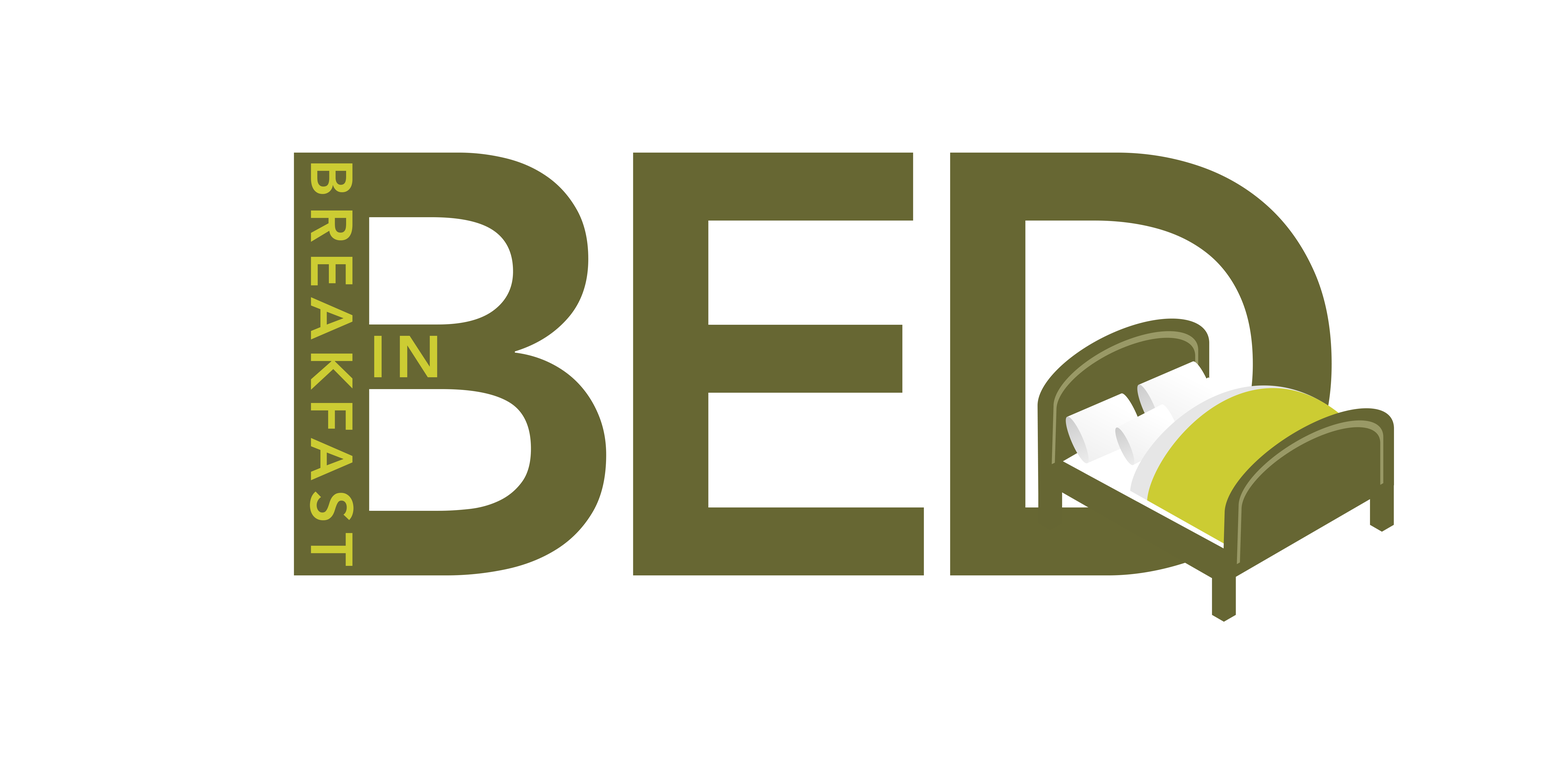
<style>
.page{position:relative;width:1544px;height:772px;background:#ffffff}
.page>*{position:absolute;margin:0}
.t1{font:597.2px "Avenir-Heavy";letter-spacing:-0.08em;color:#666632}
.t2{font:58.5px "Avenir-Heavy";letter-spacing:0.16em;color:#cccc33}
</style>
<div class="page">
<p class="t1" style="left:294px;top:153px;width:1038px;height:423px">BED</p>
<p class="t2" style="left:310px;top:163px;width:44px;height:403px;rotate:90deg">BREAKFAST</p>
<p class="t2" style="left:374px;top:336px;width:63px;height:41px">IN</p>
</div>
